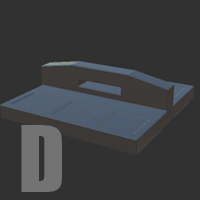
<style>
.page{position:relative;width:200px;height:200px;background:#313131}
.page>*{position:absolute;margin:0}
.t1{font:85.1px "Impact";color:#737373}
</style>
<div class="page">
<p class="t1" style="left:21px;top:125px;width:41px;height:67px">D</p>
</div>
